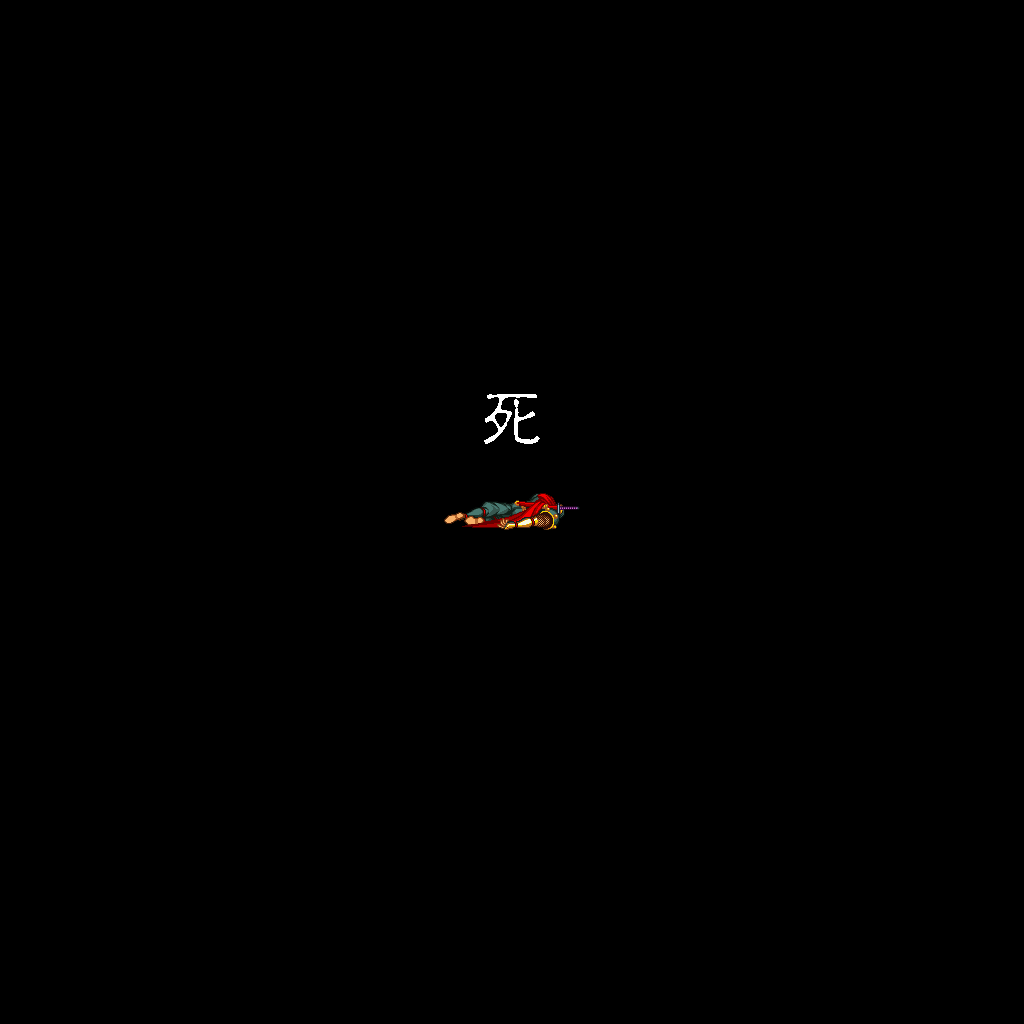
<style>
.page{position:relative;width:1024px;height:1024px;background:#000000}
.page>*{position:absolute;margin:0}
.t1{font:60px "DFKoIn-W4-WING-RKSJ-H";color:#ffffff}
</style>
<div class="page">
<p class="t1" style="left:484px;top:394px;width:56px;height:50px">死</p>
</div>
